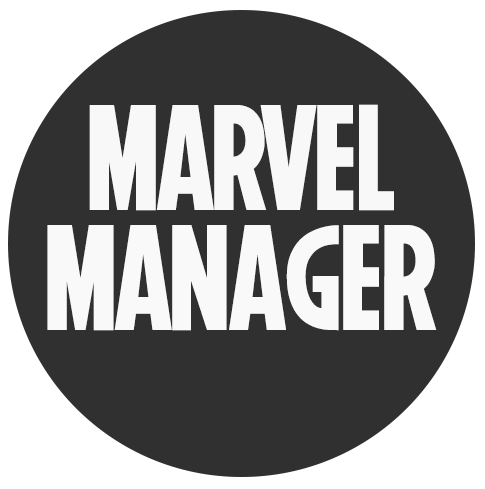
<style>
.page{position:relative;width:485px;height:489px;background:#303030}
.page>*{position:absolute;margin:0}
.t1{font:150px "Marvel-Regular";color:#f8f8f8}
.t2{font:150px "Marvel-Regular";color:#f9f9f9}
</style>
<div class="page">
<p class="t1" style="left:89px;top:104px;width:305px;height:107px">MARVEL</p>
<p class="t2" style="left:47px;top:225px;width:390px;height:106px">MANAGER</p>
</div>
